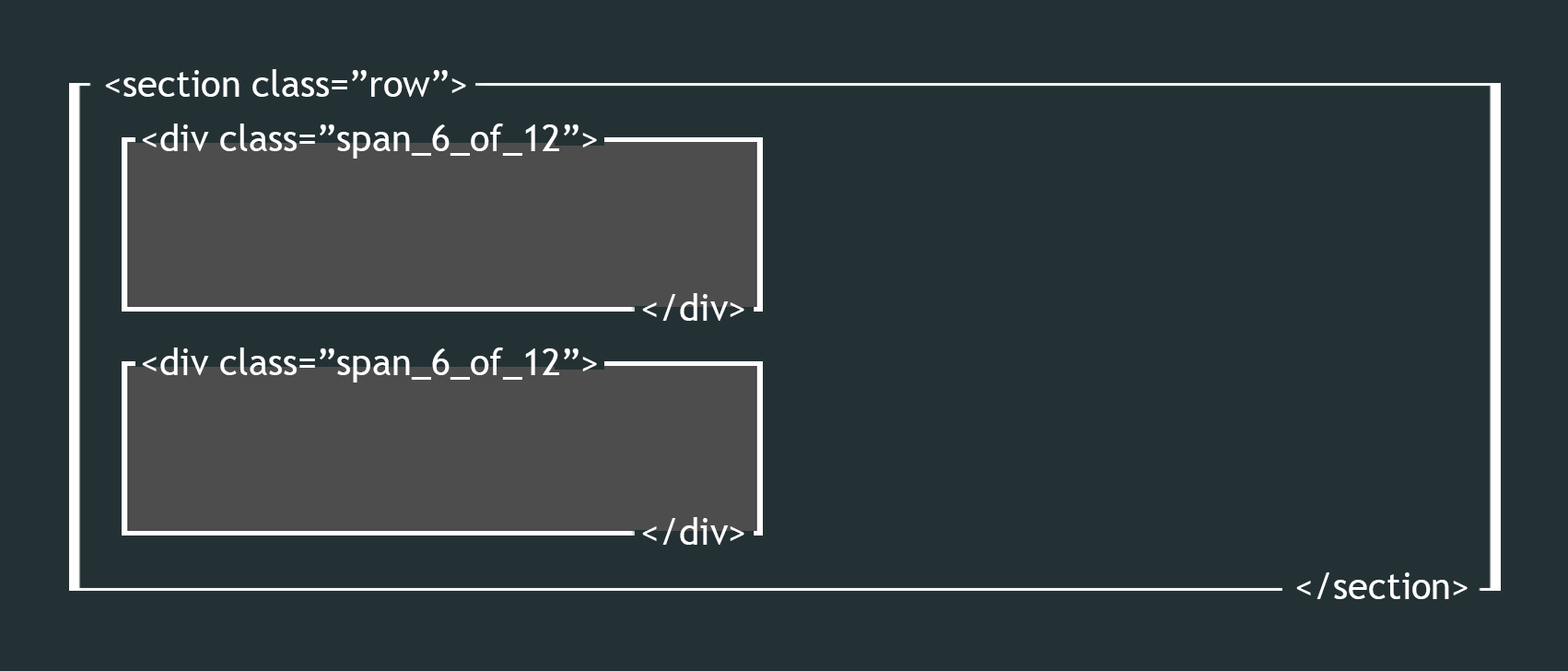
<style>
.page{position:relative;width:1568px;height:671px;background:#233135}
.page>*{position:absolute;margin:0}
.t1{font:36.9px "TrebuchetMS";color:#ffffff}
</style>
<div class="page">
<p class="t1" style="left:105px;top:69px;width:361px;height:28px">&lt;section class=”row”&gt;</p>
<p class="t1" style="left:142px;top:123px;width:455px;height:35px">&lt;div class=”span_6_of_12”&gt;</p>
<p class="t1" style="left:642px;top:293px;width:102px;height:28px">&lt;/div&gt;</p>
<p class="t1" style="left:142px;top:347px;width:455px;height:35px">&lt;div class=”span_6_of_12”&gt;</p>
<p class="t1" style="left:642px;top:517px;width:102px;height:27px">&lt;/div&gt;</p>
<p class="t1" style="left:1296px;top:572px;width:172px;height:27px">&lt;/section&gt;</p>
</div>
